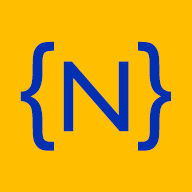
<style>
.page{position:relative;width:192px;height:192px;background:#ffbf00}
.page>*{position:absolute;margin:0}
.t1{font:115.9px "GillSans";color:#0030b2}
.t2{font:101.7px "GillSans";color:#0030b2}
</style>
<div class="page">
<p class="t1" style="left:20px;top:41px;width:151px;height:110px">{<span class="t2">N</span>}</p>
</div>
